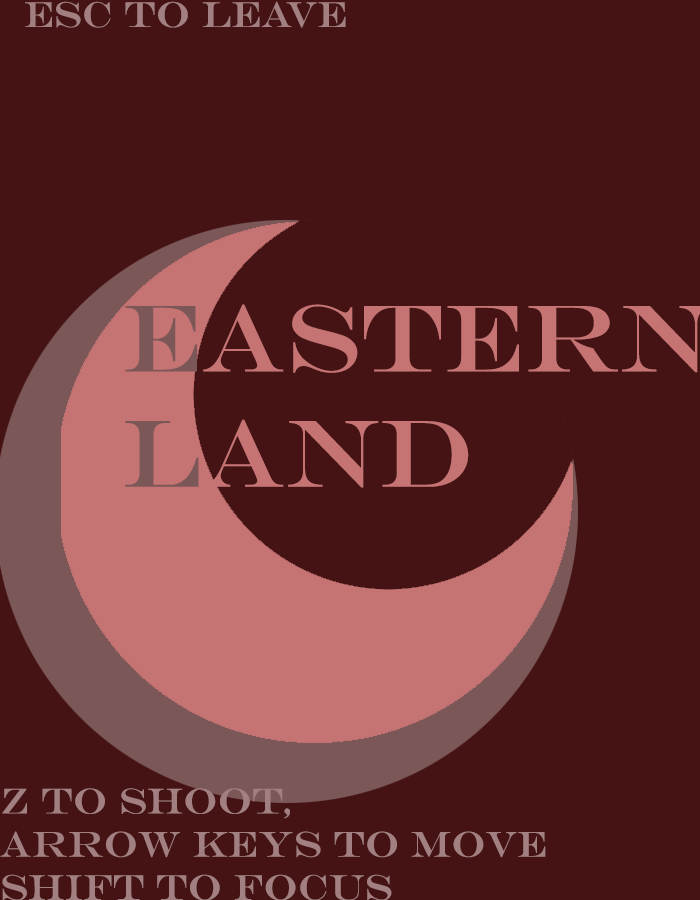
<style>
.page{position:relative;width:700px;height:900px;background:#451314}
.page>*{position:absolute;margin:0}
.t1{font:36px "EngraversMT";color:#a27f80}
</style>
<div class="page">
<p class="t1" style="left:25px;top:1px;width:321px;height:27px">ESC to leave</p>
<p class="t1" style="left:0px;top:788px;width:546px;height:113px">Z to shoot,<br>Arrow Keys to move<br>Shift to focus</p>
</div>
